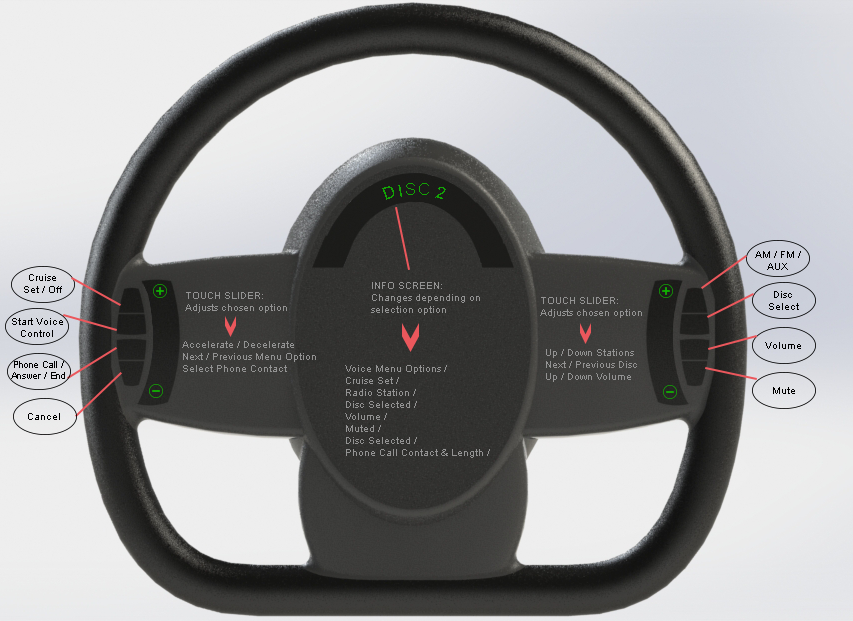
<style>
.page{position:relative;width:853px;height:621px}
.page>*{position:absolute;margin:0}
.t1{font:16.6px "ArialMT";color:#13a305}
.t2{font:16.5px "ArialMT";color:#13a305}
.t3{font:10px "ArialMT";color:#000000}
.t4{font:10px "ArialMT";color:#939393}
.t5{font:9px "ArialMT";color:#000000}
</style>
<div class="page">
<p class="t1" style="left:398px;top:185px;width:4px;height:12px;rotate:-10deg">I</p>
<p class="t2" style="left:406px;top:183px;width:9px;height:12px">S</p>
<p class="t2" style="left:419px;top:183px;width:10px;height:12px">C</p>
<p class="t1" style="left:382px;top:186px;width:12px;height:14px;rotate:-18deg">D</p>
<p class="t1" style="left:435px;top:187px;width:11px;height:12px;rotate:15deg">2</p>
<p class="t3" style="left:755px;top:251px;width:46px;height:19px;text-align:center">AM / FM /<br>AUX</p>
<p class="t3" style="left:24px;top:274px;width:38px;height:19px;text-align:center">Cruise<br>Set / Off</p>
<p class="t4" style="left:185px;top:292px;width:102px;height:21px">TOUCH SLIDER:<br>Adjusts chosen option</p>
<p class="t4" style="left:371px;top:282px;width:109px;height:33px">INFO SCREEN:<br>Changes depending on<br>selection option</p>
<p class="t3" style="left:769px;top:291px;width:30px;height:19px;text-align:center">Disc<br>Select</p>
<p class="t4" style="left:540px;top:297px;width:102px;height:21px">TOUCH SLIDER:<br>Adjusts chosen option</p>
<p class="t3" style="left:12px;top:318px;width:51px;height:19px;text-align:center">Start Voice<br>Control</p>
<p class="t4" style="left:182px;top:341px;width:134px;height:31px">Accelerate / Decelerate<br>Next / Previous Menu Option<br>Select Phone Contact</p>
<p class="t3" style="left:765px;top:342px;width:36px;height:7px">Volume</p>
<p class="t4" style="left:546px;top:349px;width:91px;height:33px">Up / Down Stations<br>Next / Previous Disc<br>Up / Down Volume</p>
<p class="t5" style="left:11px;top:361px;width:54px;height:18px;text-align:center">Phone Call /<br>Answer / End</p>
<p class="t4" style="left:345px;top:365px;width:145px;height:93px">Voice Menu Options /<br>Cruise Set /<br>Radio Station /<br>Disc Selected /<br>Volume /<br>Muted /<br>Disc Selected /<br>Phone Call Contact &amp; Length /</p>
<p class="t3" style="left:773px;top:387px;width:22px;height:7px">Mute</p>
<p class="t3" style="left:28px;top:413px;width:32px;height:7px">Cancel</p>
</div>
